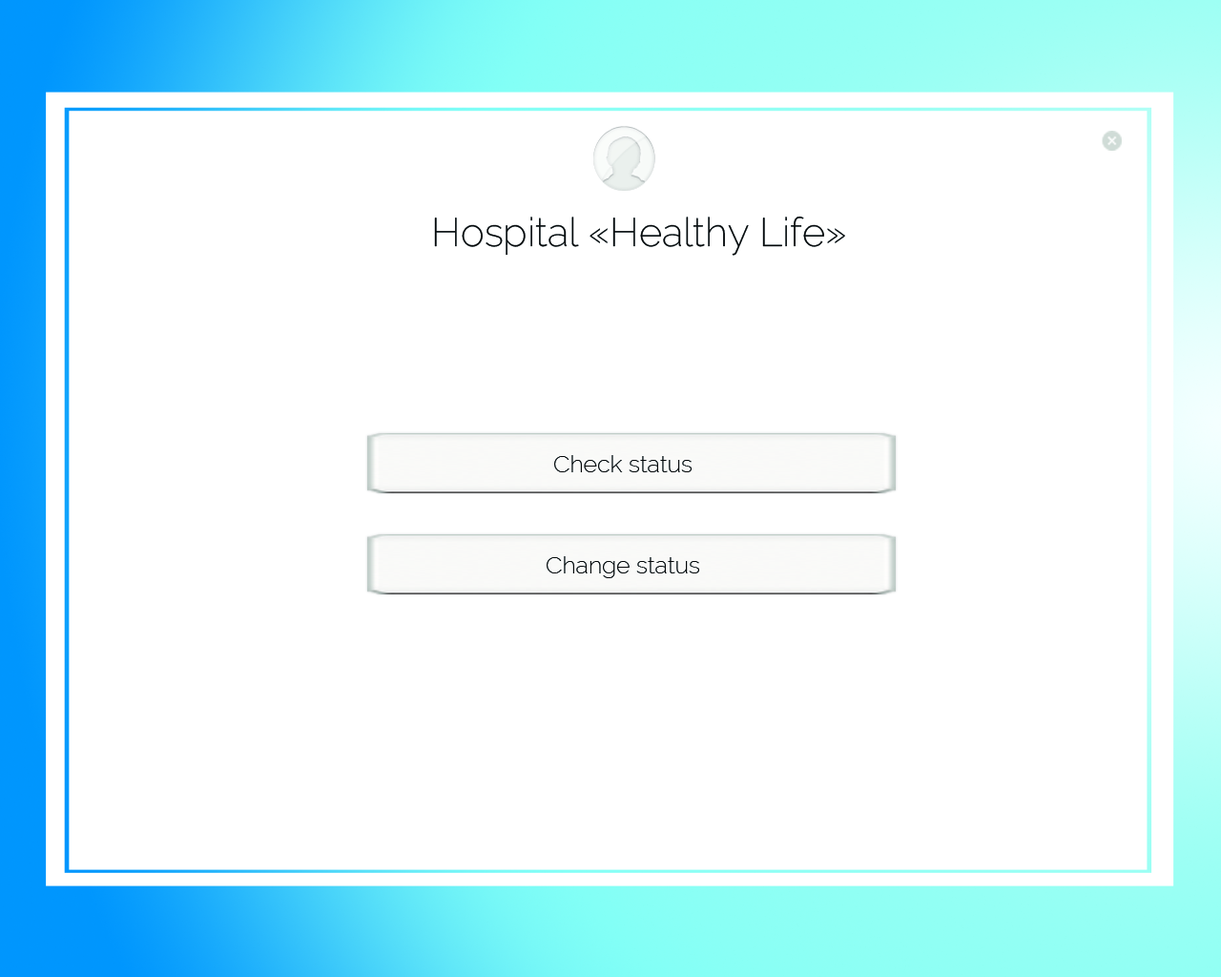
<style>
.page{position:relative;width:1221px;height:977px;background:#ffffff}
.page>*{position:absolute;margin:0}
.t1{font:39.7px "Raleway-ExtraLight";color:#050708}
.t2{font:23.8px "Raleway-ExtraLight";color:#050708}
</style>
<div class="page">
<p class="t1" style="left:434px;top:216px;width:411px;height:40px">Hospital «Healthy Life»</p>
<p class="t2" style="left:554px;top:455px;width:138px;height:17px">Check status</p>
<p class="t2" style="left:547px;top:556px;width:152px;height:22px">Change status</p>
</div>
